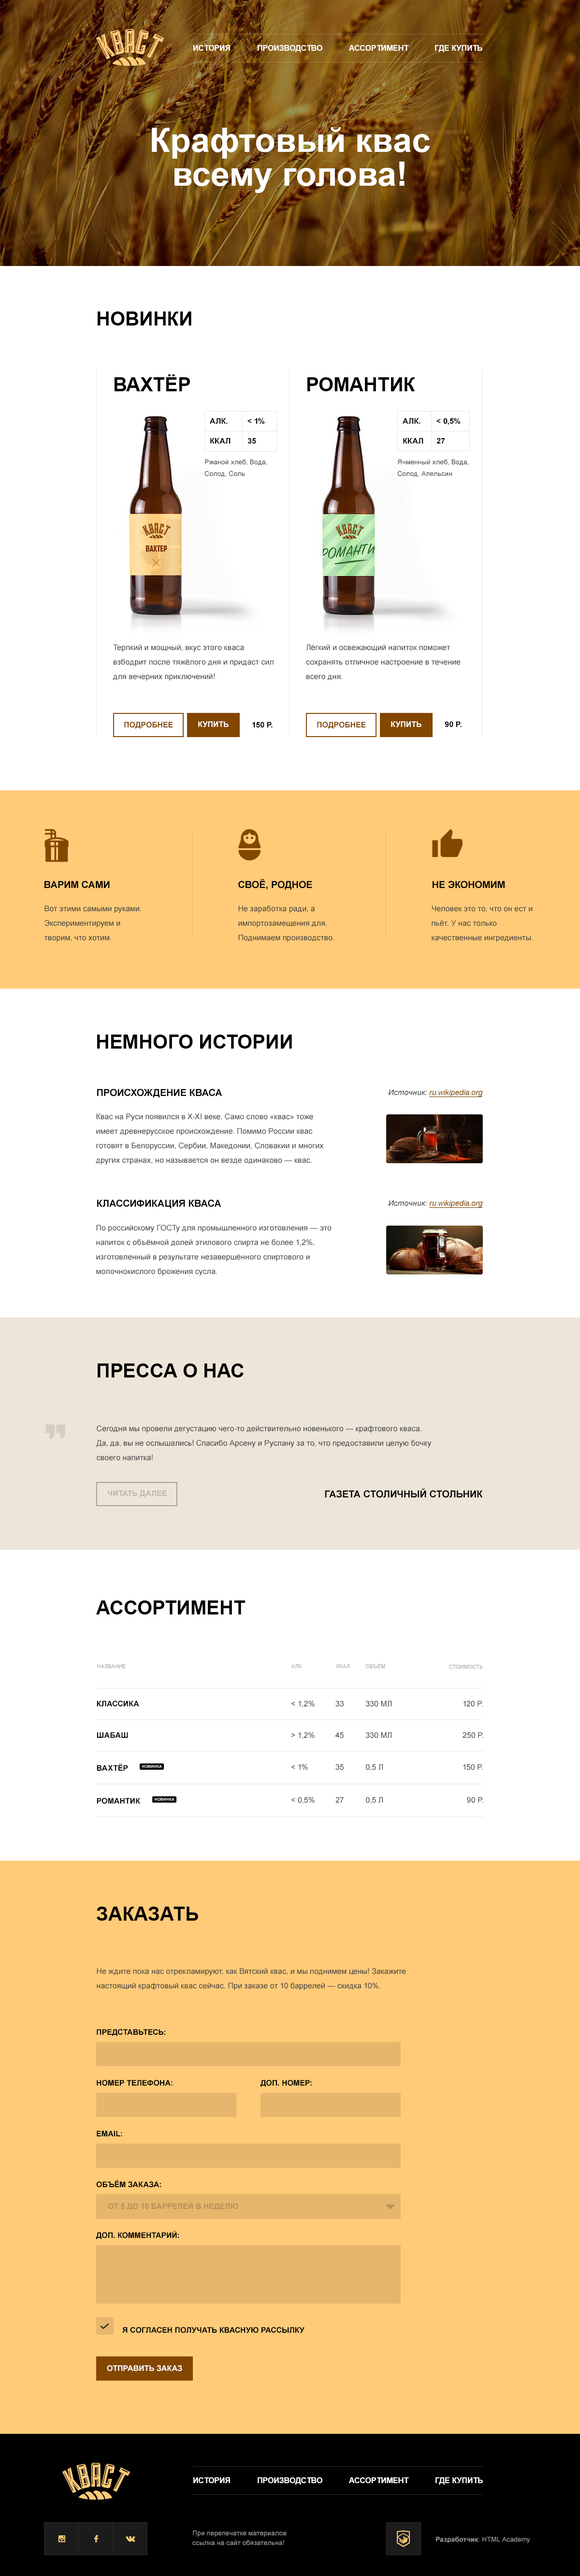
<style>
.page{position:relative;width:580px;height:2576px;background:#ffffff}
.page>*{position:absolute;margin:0}
.t1{font:7.7px "Arial-BoldMT";color:#ffffff}
.t2{font:7.7px "Arial-BoldMT";color:#ffffff;text-transform:uppercase}
.t3{font:33.9px/33.9px "Arial-BoldMT";color:#ffffff}
.t4{font:19.3px "Arial-BoldMT";color:#000000;text-transform:uppercase}
.t5{font:7.7px/19.8px "Arial-BoldMT";color:#000000}
.t6{font:7.7px/19.8px "Arial-BoldMT";color:#000000;text-transform:uppercase}
.t7{font:6.8px/11.6px "ArialMT";color:#404040}
.t8{font:7.7px/14.5px "ArialMT";color:#404040}
.t9{font:7.7px "Arial-BoldMT";color:#834700;text-transform:uppercase}
.t10{font:7.7px "Arial-BoldMT";color:#000000;text-transform:uppercase}
.t11{font:9.7px "Arial-BoldMT";color:#000000;text-transform:uppercase}
.t12{font:7.7px "Arial-ItalicMT";color:#834700;text-decoration:underline}
.t13{font:7.7px "Arial-ItalicMT";color:#444444}
.t14{font:7.7px "Arial-BoldMT";color:#bcb6ab;text-transform:uppercase}
.t15{font:5.3px "ArialMT";color:#999999;text-transform:uppercase}
.t16{font:7.7px "ArialMT";color:#404040;text-transform:uppercase}
.t17{font:3.9px "Arial-BoldMT";color:#ffffff;text-transform:uppercase}
.t18{font:7.7px "Arial-BoldMT";color:#b69054;text-transform:uppercase}
.t19{font:6.8px/9.7px "ArialMT";color:#989898}
.t20{font:6.8px "Arial-BoldMT";color:#989898}
.t21{font:6.8px "ArialMT";color:#989898}
.t22{font:6.8px "ArialMT";color:#989898;text-transform:uppercase}
</style>
<div class="page">
<p class="t1" style="left:193px;top:45px;width:37px;height:6px">ИСТОРИЯ</p>
<p class="t1" style="left:258px;top:45px;width:65px;height:7px">ПРОИЗВОДСТВО</p>
<p class="t2" style="left:349px;top:45px;width:60px;height:6px">Ассортимент</p>
<p class="t1" style="left:435px;top:45px;width:48px;height:7px">ГДЕ КУПИТЬ</p>
<p class="t3" style="left:152px;top:127px;width:278px;height:66px;text-align:center">Крафтовый квас<br>всему голова!</p>
<p class="t4" style="left:98px;top:311px;width:94px;height:15px">Новинки</p>
<p class="t4" style="left:115px;top:374px;width:75px;height:17px">Вахтёр</p>
<p class="t4" style="left:308px;top:377px;width:107px;height:14px">Романтик</p>
<p class="t5" style="left:210px;top:418px;width:21px;height:26px">АЛК.<br>ККАЛ</p>
<p class="t6" style="left:248px;top:418px;width:17px;height:26px">&lt; 1%<br>35</p>
<p class="t5" style="left:403px;top:418px;width:21px;height:26px">АЛК.<br>ККАЛ</p>
<p class="t6" style="left:437px;top:418px;width:23px;height:26px">&lt; 0,5%<br>27</p>
<p class="t7" style="left:205px;top:459px;width:62px;height:18px">Ржаной хлеб, Вода,<br>Солод, Соль</p>
<p class="t7" style="left:398px;top:459px;width:71px;height:18px">Ячменный хлеб, Вода,<br>Солод, Апельсин</p>
<p class="t8" style="left:113px;top:644px;width:161px;height:37px">Терпкий и мощный, вкус этого кваса взбодрит после тяжёлого дня и придаст сил для вечерних приключений!</p>
<p class="t8" style="left:306px;top:644px;width:155px;height:37px">Лёгкий и освежающий напиток поможет сохранять отличное настроение в течение всего дня.</p>
<p class="t9" style="left:124px;top:722px;width:49px;height:7px">Подробнее</p>
<p class="t2" style="left:198px;top:721px;width:31px;height:6px">Купить</p>
<p class="t10" style="left:252px;top:722px;width:21px;height:6px">150 Р.</p>
<p class="t9" style="left:317px;top:722px;width:49px;height:7px">Подробнее</p>
<p class="t2" style="left:391px;top:721px;width:31px;height:6px">Купить</p>
<p class="t10" style="left:445px;top:721px;width:17px;height:6px">90 Р.</p>
<p class="t11" style="left:44px;top:881px;width:66px;height:7px">Варим сами</p>
<p class="t11" style="left:238px;top:879px;width:74px;height:11px">СВоё, родное</p>
<p class="t11" style="left:433px;top:881px;width:72px;height:7px">Не экономим</p>
<p class="t8" style="left:44px;top:905px;width:97px;height:37px">Вот этими самыми руками. Экспериментируем и творим, что хотим.</p>
<p class="t8" style="left:238px;top:905px;width:96px;height:37px">Не заработка ради, а импортозамещения для. Поднимаем производство.</p>
<p class="t8" style="left:432px;top:905px;width:101px;height:37px">Человек это то, что он ест и пьёт. У нас только качественные ингредиенты.</p>
<p class="t4" style="left:97px;top:1035px;width:195px;height:14px">Немного истории</p>
<p class="t11" style="left:97px;top:1089px;width:125px;height:9px">Происхождение кваса</p>
<p class="t12" style="left:388px;top:1089px;width:95px;height:8px"><span class="t13">Источник: </span>ru.wikipedia.org</p>
<p class="t8" style="left:96px;top:1113px;width:228px;height:52px">Квас на Руси появился в X-XI веке. Само слово «квас» тоже имеет древнерусское происхождение. Помимо России квас готовят в Белоруссии, Сербии, Македонии, Словакии и многих других странах, но называется он везде одинаково — квас.</p>
<p class="t11" style="left:97px;top:1199px;width:125px;height:10px">Классификация кваса</p>
<p class="t12" style="left:388px;top:1200px;width:95px;height:8px"><span class="t13">Источник: </span>ru.wikipedia.org</p>
<p class="t8" style="left:96px;top:1225px;width:236px;height:51px">По российскому ГОСТу для промышленного изготовления — это напиток с объёмной долей этилового спирта не более 1,2%, изготовленный в результате незавершённого спиртового и молочнокислого брожения сусла.</p>
<p class="t4" style="left:98px;top:1363px;width:146px;height:14px">Пресса о нас</p>
<p class="t8" style="left:96px;top:1425px;width:336px;height:36px">Сегодня мы провели дегустацию чего-то действительно новенького — крафтового кваса. Да, да, вы не ослышались! Спасибо Арсену и Руслану за то, что предоставили целую бочку своего напитка!</p>
<p class="t14" style="left:108px;top:1490px;width:59px;height:7px">Читать далее</p>
<p class="t11" style="left:325px;top:1488px;width:158px;height:10px">Газета столичный Стольник</p>
<p class="t4" style="left:96px;top:1600px;width:150px;height:14px">Ассортимент</p>
<p class="t15" style="left:97px;top:1664px;width:29px;height:4px">Название</p>
<p class="t15" style="left:291px;top:1664px;width:12px;height:4px">АЛК.</p>
<p class="t15" style="left:337px;top:1664px;width:13px;height:4px">ККАЛ</p>
<p class="t15" style="left:366px;top:1663px;width:19px;height:5px">Объём</p>
<p class="t15" style="left:449px;top:1665px;width:34px;height:4px">Стоимость</p>
<p class="t10" style="left:97px;top:1701px;width:42px;height:5px">Классика</p>
<p class="t16" style="left:292px;top:1701px;width:23px;height:7px">&lt; 1,2%</p>
<p class="t16" style="left:336px;top:1701px;width:8px;height:6px">33</p>
<p class="t16" style="left:366px;top:1701px;width:26px;height:6px">330 мл</p>
<p class="t16" style="left:463px;top:1701px;width:20px;height:6px">120 р.</p>
<p class="t10" style="left:97px;top:1732px;width:31px;height:6px">Шабаш</p>
<p class="t16" style="left:292px;top:1732px;width:23px;height:7px">&gt; 1,2%</p>
<p class="t16" style="left:336px;top:1732px;width:8px;height:6px">45</p>
<p class="t16" style="left:366px;top:1732px;width:26px;height:6px">330 мл</p>
<p class="t16" style="left:463px;top:1732px;width:21px;height:6px">250 р.</p>
<p class="t10" style="left:97px;top:1763px;width:31px;height:8px">Вахтёр</p>
<p class="t17" style="left:142px;top:1765px;width:20px;height:3px">НОВИНКА</p>
<p class="t16" style="left:292px;top:1764px;width:16px;height:6px">&lt; 1%</p>
<p class="t16" style="left:336px;top:1764px;width:8px;height:6px">35</p>
<p class="t16" style="left:366px;top:1764px;width:17px;height:7px">0,5 л</p>
<p class="t16" style="left:463px;top:1764px;width:20px;height:6px">150 р.</p>
<p class="t10" style="left:97px;top:1798px;width:43px;height:6px">Романтик</p>
<p class="t17" style="left:155px;top:1798px;width:20px;height:3px">НОВИНКА</p>
<p class="t16" style="left:292px;top:1797px;width:23px;height:7px">&lt; 0,5%</p>
<p class="t16" style="left:336px;top:1797px;width:8px;height:6px">27</p>
<p class="t16" style="left:366px;top:1797px;width:17px;height:7px">0,5 л</p>
<p class="t16" style="left:467px;top:1797px;width:17px;height:6px">90 р.</p>
<p class="t4" style="left:97px;top:1907px;width:101px;height:14px">Заказать</p>
<p class="t8" style="left:97px;top:1968px;width:309px;height:22px">Не ждите пока нас отрекламируют, как Вятский квас, и мы поднимем цены! Закажите настоящий крафтовый квас сейчас. При заказе от 10 баррелей — скидка 10%.</p>
<p class="t10" style="left:97px;top:2029px;width:68px;height:7px">Представьтесь:</p>
<p class="t10" style="left:97px;top:2080px;width:76px;height:6px">Номер ТелефонА:</p>
<p class="t10" style="left:261px;top:2080px;width:51px;height:7px">Доп. номер:</p>
<p class="t10" style="left:97px;top:2131px;width:25px;height:5px">EMail:</p>
<p class="t10" style="left:96px;top:2180px;width:65px;height:8px">Объём заказа:</p>
<p class="t18" style="left:108px;top:2202px;width:130px;height:8px">От 5 до 10 баррелей в неделю</p>
<p class="t10" style="left:96px;top:2231px;width:83px;height:8px">Доп. комментарий:</p>
<p class="t10" style="left:122px;top:2327px;width:183px;height:6px">Я согласен получать квасную рассылку</p>
<p class="t2" style="left:107px;top:2365px;width:75px;height:6px">Отправить заказ</p>
<p class="t1" style="left:193px;top:2477px;width:37px;height:6px">ИСТОРИЯ</p>
<p class="t1" style="left:258px;top:2477px;width:65px;height:8px">ПРОИЗВОДСТВО</p>
<p class="t2" style="left:349px;top:2477px;width:60px;height:6px">Ассортимент</p>
<p class="t1" style="left:436px;top:2477px;width:47px;height:8px">ГДЕ КУПИТЬ</p>
<p class="t19" style="left:192px;top:2531px;width:95px;height:14px">При перепечатке материалов <br>ссылка на сайт обязательна!</p>
<p class="t20" style="left:436px;top:2536px;width:95px;height:7px">Разработчик<span class="t21">: </span><span class="t22">HTML A</span><span class="t21">cademy</span></p>
</div>
